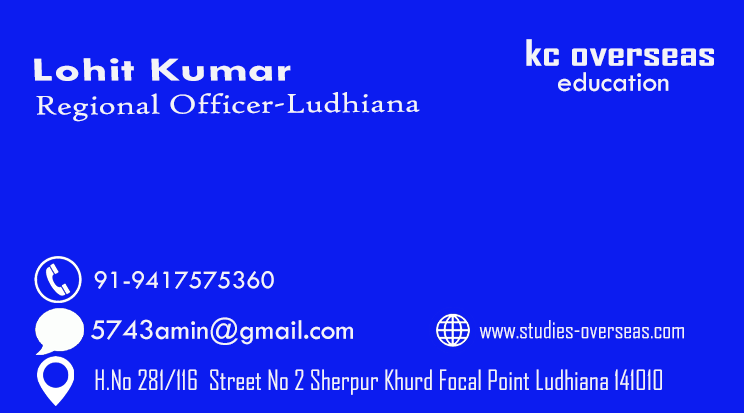
<style>
.page{position:relative;width:744px;height:413px;background:#0c1cf0}
.page>*{position:absolute;margin:0}
.t1{font:34.7px "AgencyFB-Bold";color:#f3f3f7;scale:1.34 1}
.t2{font:33.9px "TwCenMT-Bold";color:#f3f3f7;scale:1.52 1}
.t3{font:29.2px "TwCenMT-Regular";color:#f3f3f7}
.t4{font:29px "HighTowerText-Reg";color:#f3f3f7;scale:1.18 1}
.t5{font:26.1px "TwCenMT-Regular";color:#f3f3f7}
.t6{font:23.9px "AgencyFB-Reg";color:#f3f3f7}
.t7{font:26.6px "AgencyFB-Reg";color:#f3f3f7}
</style>
<div class="page">
<p class="t1" style="left:526px;top:39px;width:188px;height:27px">kc overseas</p>
<p class="t2" style="left:34px;top:58px;width:257px;height:23px">Lohit Kumar</p>
<p class="t3" style="left:558px;top:72px;width:111px;height:20px">education</p>
<p class="t4" style="left:36px;top:92px;width:384px;height:30px">Regional Officer-Ludhiana</p>
<p class="t5" style="left:94px;top:271px;width:180px;height:18px">91-9417575360</p>
<p class="t3" style="left:91px;top:317px;width:262px;height:28px">5743amin@gmail.com</p>
<p class="t6" style="left:479px;top:320px;width:205px;height:19px">www.studies-overseas.com</p>
<p class="t7" style="left:95px;top:369px;width:567px;height:26px">H.No 281/116  Street No 2 Sherpur Khurd Focal Point Ludhiana 141010</p>
</div>
